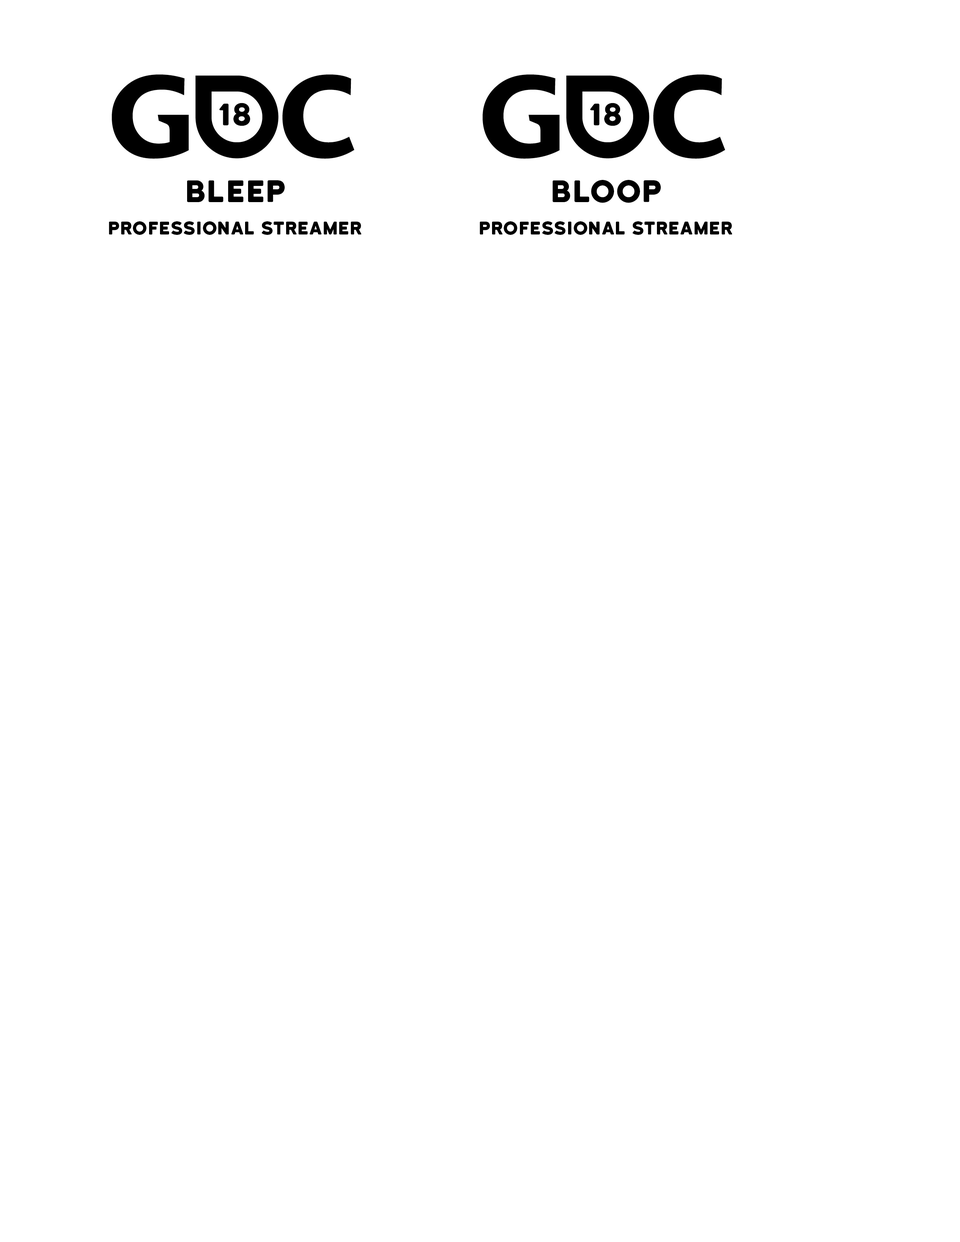
<style>
.page{position:relative;width:960px;height:1242px;background:#ffffff}
.page>*{position:absolute;margin:0}
.t1{font:29.4px "KatahdinRound-Regular";color:#000000}
.t2{font:17.4px "KatahdinRound-Regular";color:#000000}
</style>
<div class="page">
<p class="t1" style="left:219px;top:103px;width:31px;height:23px">18</p>
<p class="t1" style="left:590px;top:103px;width:31px;height:23px">18</p>
<p class="t1" style="left:187px;top:180px;width:98px;height:22px">BLEEP</p>
<p class="t1" style="left:553px;top:180px;width:108px;height:23px">BLOOP</p>
<p class="t2" style="left:109px;top:221px;width:252px;height:14px">PROFESSIONAL STREAMER</p>
<p class="t2" style="left:480px;top:221px;width:252px;height:14px">PROFESSIONAL STREAMER</p>
</div>
